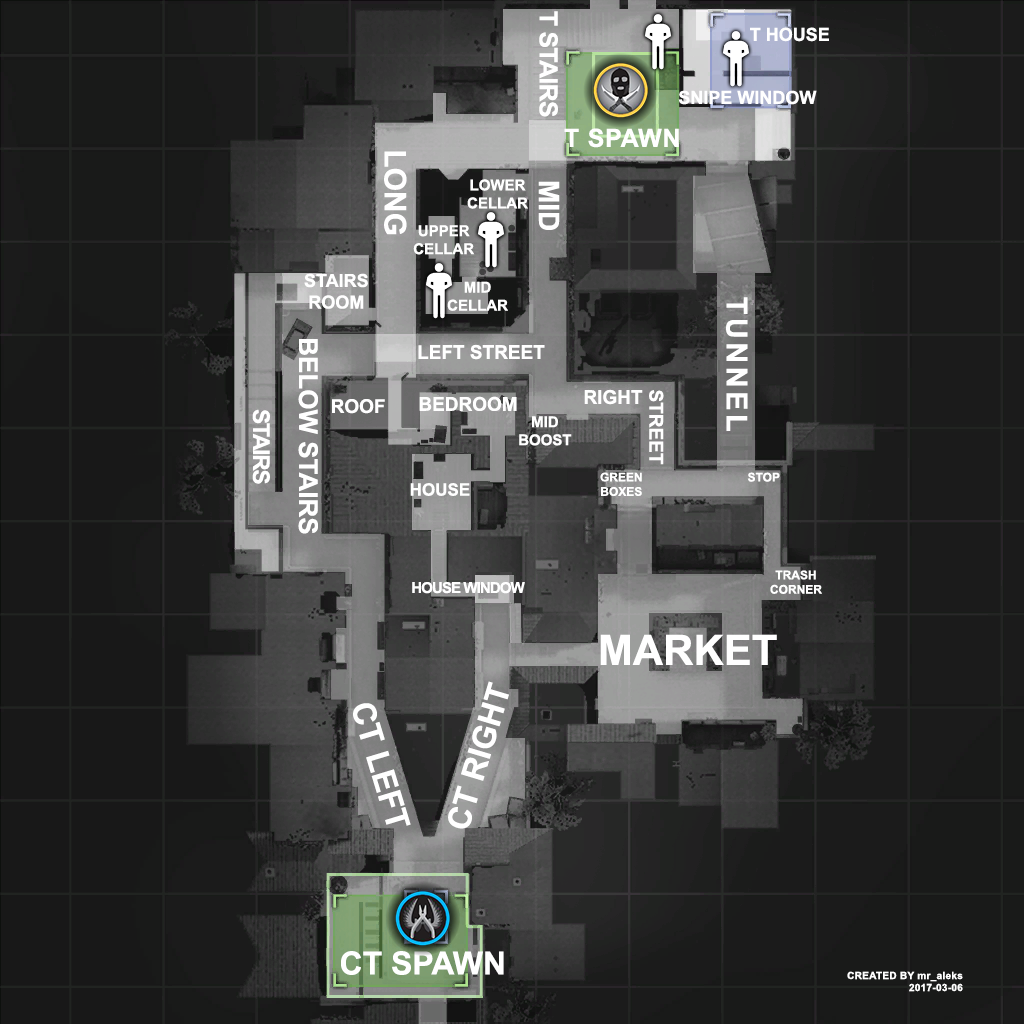
<style>
.page{position:relative;width:1024px;height:1024px}
.page>*{position:absolute;margin:0}
.t1{font:25px "Arial-BoldMT";letter-spacing:-0.03em;color:#ffffff;text-transform:uppercase}
.t2{font:18px "Arial-BoldMT";color:#ffffff;text-transform:uppercase}
.t3{font:25px "Arial-BoldMT";letter-spacing:0.03em;color:#ffffff;text-transform:uppercase}
.t4{font:30px "Arial-BoldMT";color:#ffffff;text-transform:uppercase}
.t5{font:15px "Arial-BoldMT";color:#ffffff;text-transform:uppercase}
.t6{font:28px "Arial-BoldMT";color:#ffffff;text-transform:uppercase}
.t7{font:29px "Arial-BoldMT";letter-spacing:0.12em;color:#ffffff;text-transform:uppercase}
.t8{font:26px "Arial-BoldMT";color:#ffffff;text-transform:uppercase}
.t9{font:19px "Arial-BoldMT";color:#ffffff;text-transform:uppercase}
.t10{font:23px "Arial-BoldMT";letter-spacing:-0.06em;color:#ffffff;text-transform:uppercase}
.t11{font:12px "Arial-BoldMT";color:#ffffff;text-transform:uppercase}
.t12{font:17px "Arial-BoldMT";color:#ffffff;text-transform:uppercase}
.t13{font:15px "Arial-BoldMT";letter-spacing:-0.06em;color:#ffffff;text-transform:uppercase}
.t14{font:42px "Arial-BoldMT";color:#ffffff;text-transform:uppercase}
.t15{font:32px "Arial-BoldMT";color:#ffffff;text-transform:uppercase}
.t16{font:10px "Arial-BoldMT";letter-spacing:0.03em;color:#ffffff}
.t17{font:10px "Arial-BoldMT";letter-spacing:0.03em;color:#ffffff;text-transform:uppercase}
</style>
<div class="page">
<p class="t1" style="left:539px;top:11px;width:19px;height:106px;rotate:90deg">t stairs</p>
<p class="t2" style="left:750px;top:27px;width:79px;height:15px">t house</p>
<p class="t2" style="left:678px;top:90px;width:139px;height:15px">snipe window</p>
<p class="t3" style="left:564px;top:128px;width:115px;height:20px">T spawn</p>
<p class="t4" style="left:384px;top:151px;width:23px;height:84px;rotate:90deg">long</p>
<p class="t5" style="left:467px;top:179px;width:61px;height:30px;text-align:center">lower<br>cellar</p>
<p class="t6" style="left:538px;top:181px;width:22px;height:49px;rotate:90deg">mid</p>
<p class="t5" style="left:413px;top:225px;width:62px;height:30px;text-align:center">upper<br>cellar</p>
<p class="t2" style="left:304px;top:273px;width:64px;height:36px;text-align:center">stairs<br>room</p>
<p class="t5" style="left:447px;top:281px;width:61px;height:30px;text-align:center">mid<br>cellar</p>
<p class="t7" style="left:726px;top:297px;width:22px;height:134px;rotate:90deg">tunnel</p>
<p class="t8" style="left:298px;top:339px;width:20px;height:195px;rotate:90deg">below stairs</p>
<p class="t9" style="left:418px;top:344px;width:127px;height:16px">left street</p>
<p class="t9" style="left:584px;top:389px;width:59px;height:16px">right</p>
<p class="t9" style="left:649px;top:390px;width:15px;height:75px;rotate:90deg">street</p>
<p class="t9" style="left:332px;top:399px;width:53px;height:15px">roof</p>
<p class="t9" style="left:419px;top:396px;width:98px;height:15px">bedroom</p>
<p class="t10" style="left:252px;top:409px;width:18px;height:75px;rotate:90deg">stairs</p>
<p class="t5" style="left:519px;top:416px;width:53px;height:30px;text-align:center">mid<br>boost</p>
<p class="t11" style="left:600px;top:472px;width:42px;height:24px;text-align:center">green<br>boxes</p>
<p class="t11" style="left:747px;top:472px;width:33px;height:10px">stop</p>
<p class="t12" style="left:410px;top:483px;width:60px;height:13px">house</p>
<p class="t13" style="left:412px;top:582px;width:113px;height:12px">house window</p>
<p class="t11" style="left:770px;top:570px;width:52px;height:24px;text-align:center">trash<br>corner</p>
<p class="t14" style="left:600px;top:634px;width:177px;height:31px">market</p>
<p class="t15" style="left:448px;top:681px;width:61px;height:148px;rotate:-73deg">ct right</p>
<p class="t15" style="left:353px;top:703px;width:58px;height:123px;rotate:73deg">ct left</p>
<p class="t15" style="left:341px;top:951px;width:163px;height:24px">ct spawn</p>
<p class="t16" style="left:847px;top:971px;width:116px;height:21px;text-align:right"><span class="t17">created by </span>mr_aleks<br>2017-03-06</p>
</div>
